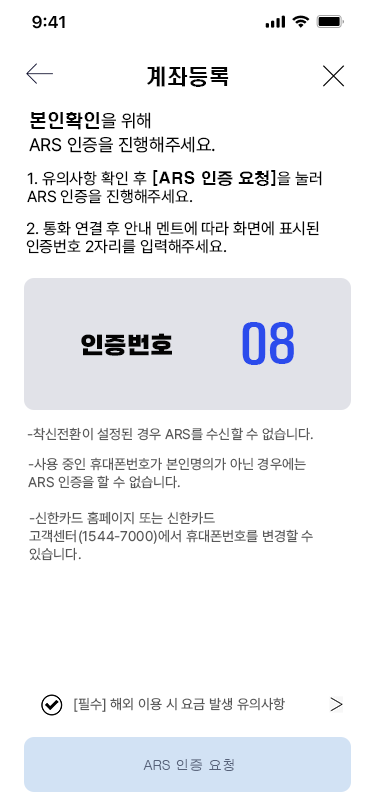
<style>
.page{position:relative;width:375px;height:812px;background:#ffffff}
.page>*{position:absolute;margin:0}
.t1{font:21px "H2hdrM";color:#030303}
.t2{font:18px/24px "Pretendard-Regular";color:#030303}
.t3{font:18px/24px "H2hdrM";color:#030303}
.t4{font:16px/18px "Pretendard-Regular";color:#030303}
.t5{font:16px/18px "H2gtrE";color:#030303}
.t6{font:48px "H2hdrM";color:#2b4bec}
.t7{font:24px "SBAggroB";color:#030303}
.t8{font:14px "Pretendard-Regular";color:#585858}
.t9{font:14px/18px "Pretendard-Regular";color:#585858}
.t10{font:14px "Gulim";color:#566179}
</style>
<div class="page">
<p class="t1" style="left:147px;top:66px;width:82px;height:21px">계좌등록</p>
<p class="t2" style="left:29px;top:112px;width:186px;height:41px"><span class="t3">본인확인</span>을 위해 <br>ARS 인증을 진행해주세요.</p>
<p class="t4" style="left:27px;top:170px;width:295px;height:34px">1. 유의사항 확인 후 <span class="t5">[ARS 인증 요청]</span>을 눌러 <br>ARS 인증을 진행해주세요.</p>
<p class="t4" style="left:26px;top:221px;width:293px;height:33px">2. 통화 연결 후 안내 멘트에 따라 화면에 표시된 <br>인증번호 2자리를 입력해주세요.</p>
<p class="t6" style="left:242px;top:322px;width:52px;height:43px">08</p>
<p class="t7" style="left:81px;top:333px;width:91px;height:23px">인증번호</p>
<p class="t8" style="left:27px;top:427px;width:286px;height:14px">-착신전환이 설정된 경우 ARS를 수신할 수 없습니다.</p>
<p class="t9" style="left:28px;top:457px;width:278px;height:32px">-사용 중인 휴대폰번호가 본인명의가 아닌 경우에는 <br>ARS 인증을 할 수 없습니다.</p>
<p class="t9" style="left:29px;top:511px;width:284px;height:50px">-신한카드 홈페이지 또는 신한카드 <br>고객센터(1544-7000)에서 휴대폰번호를 변경할 수<br>있습니다.</p>
<p class="t8" style="left:74px;top:697px;width:211px;height:15px">[필수] 해외 이용 시 요금 발생 유의사항</p>
<p class="t10" style="left:143px;top:759px;width:91px;height:12px">ARS 인증 요청</p>
</div>
